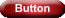
<style>
.page{position:relative;width:65px;height:18px}
.page>*{position:absolute;margin:0}
.t1{font:11px "Arial-BoldMT";color:#ffffff}
</style>
<div class="page">
<p class="t1" style="left:15px;top:4px;width:35px;height:8px">Button</p>
</div>
